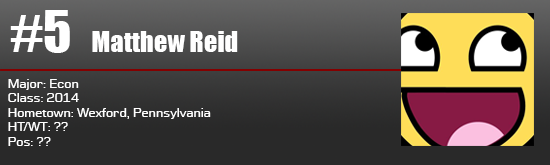
<style>
.page{position:relative;width:550px;height:165px}
.page>*{position:absolute;margin:0}
.t1{font:52.8px "Impact";color:#ffffff}
.t2{font:26.4px "Impact";color:#ffffff}
.t3{font:12px "Moire";color:#ffffff}
</style>
<div class="page">
<p class="t1" style="left:10px;top:10px;width:60px;height:43px">#5</p>
<p class="t2" style="left:92px;top:31px;width:146px;height:21px">Matthew Reid</p>
<p class="t3" style="left:8px;top:79px;width:203px;height:67px">Major: Econ<br>Class: 2014<br>Hometown: Wexford, Pennsylvania<br>HT/WT: ??<br>Pos: ??</p>
</div>
